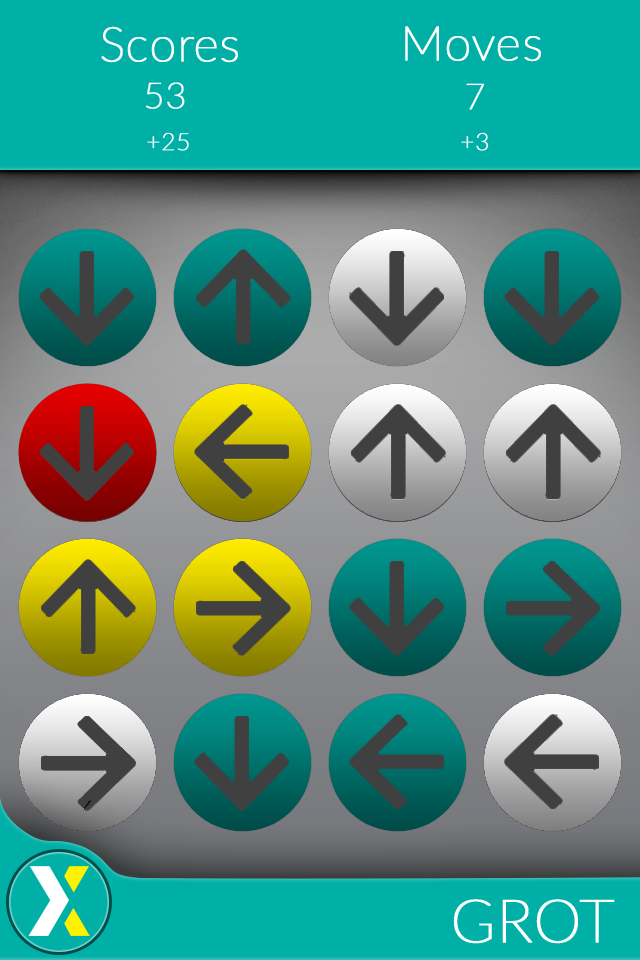
<style>
.page{position:relative;width:640px;height:960px;background:#00b0a7}
.page>*{position:absolute;margin:0}
.t1{font:48px "Lato-Thin";color:#ffffff;font-weight:bold}
.t2{font:36px "Lato-Thin";color:#ffffff;font-weight:bold}
.t3{font:24px "Lato-Thin";color:#ffffff;font-weight:bold}
.t4{font:60px "Lato-Thin";color:#ffffff;font-weight:bold}
</style>
<div class="page">
<p class="t1" style="left:101px;top:26px;width:137px;height:37px">Scores</p>
<p class="t1" style="left:405px;top:26px;width:136px;height:36px">Moves</p>
<p class="t2" style="left:145px;top:82px;width:40px;height:27px">53</p>
<p class="t2" style="left:466px;top:83px;width:19px;height:27px">7</p>
<p class="t3" style="left:147px;top:132px;width:42px;height:19px">+25</p>
<p class="t3" style="left:461px;top:132px;width:28px;height:19px">+3</p>
<p class="t4" style="left:453px;top:899px;width:162px;height:45px">GROT</p>
</div>
